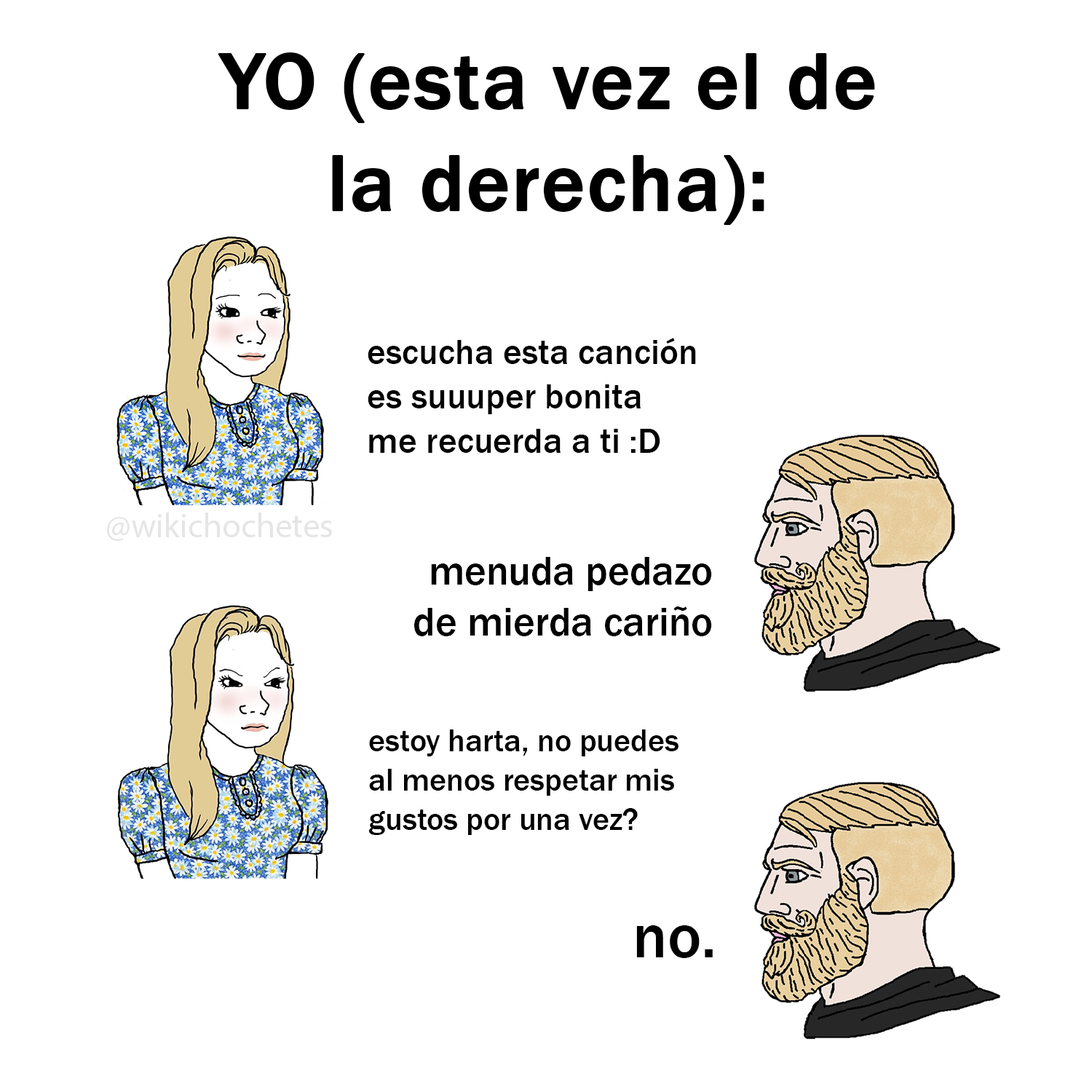
<style>
.page{position:relative;width:1092px;height:1092px;background:#ffffff}
.page>*{position:absolute;margin:0}
.t1{font:82.6px "FranklinGothic-Medium";color:#000000;font-weight:bold}
.t2{font:35.9px "FranklinGothic-Medium";color:#000000}
.t3{font:34px "MyriadPro-Regular";color:#e5e5e5}
.t4{font:41.3px "FranklinGothic-Medium";color:#000000}
.t5{font:31.9px "FranklinGothic-Medium";color:#000000}
.t6{font:63.9px "FranklinGothic-Medium";color:#000000}
</style>
<div class="page">
<p class="t1" style="left:218px;top:52px;width:657px;height:174px;text-align:center">YO (esta vez el de<br>la derecha):</p>
<p class="t2" style="left:368px;top:338px;width:328px;height:115px">escucha esta canción<br>es suuuper bonita<br>me recuerda a ti :D</p>
<p class="t3" style="left:107px;top:513px;width:225px;height:28px">@wikichochetes</p>
<p class="t4" style="left:414px;top:557px;width:298px;height:79px;text-align:right">menuda pedazo<br>de mierda cariño</p>
<p class="t5" style="left:369px;top:729px;width:309px;height:106px">estoy harta, no puedes<br>al menos respetar mis<br>gustos por una vez?</p>
<p class="t6" style="left:636px;top:925px;width:77px;height:33px">no.</p>
</div>
